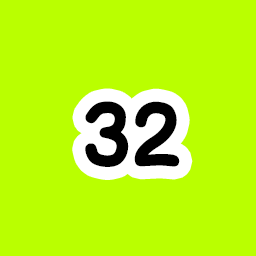
<style>
.page{position:relative;width:256px;height:256px;background:#baff00}
.page>*{position:absolute;margin:0}
.t1{font:90px "ComicHelvetic-Medium";color:#000000}
</style>
<div class="page">
<p class="t1" style="left:85px;top:101px;width:95px;height:66px">32</p>
</div>
